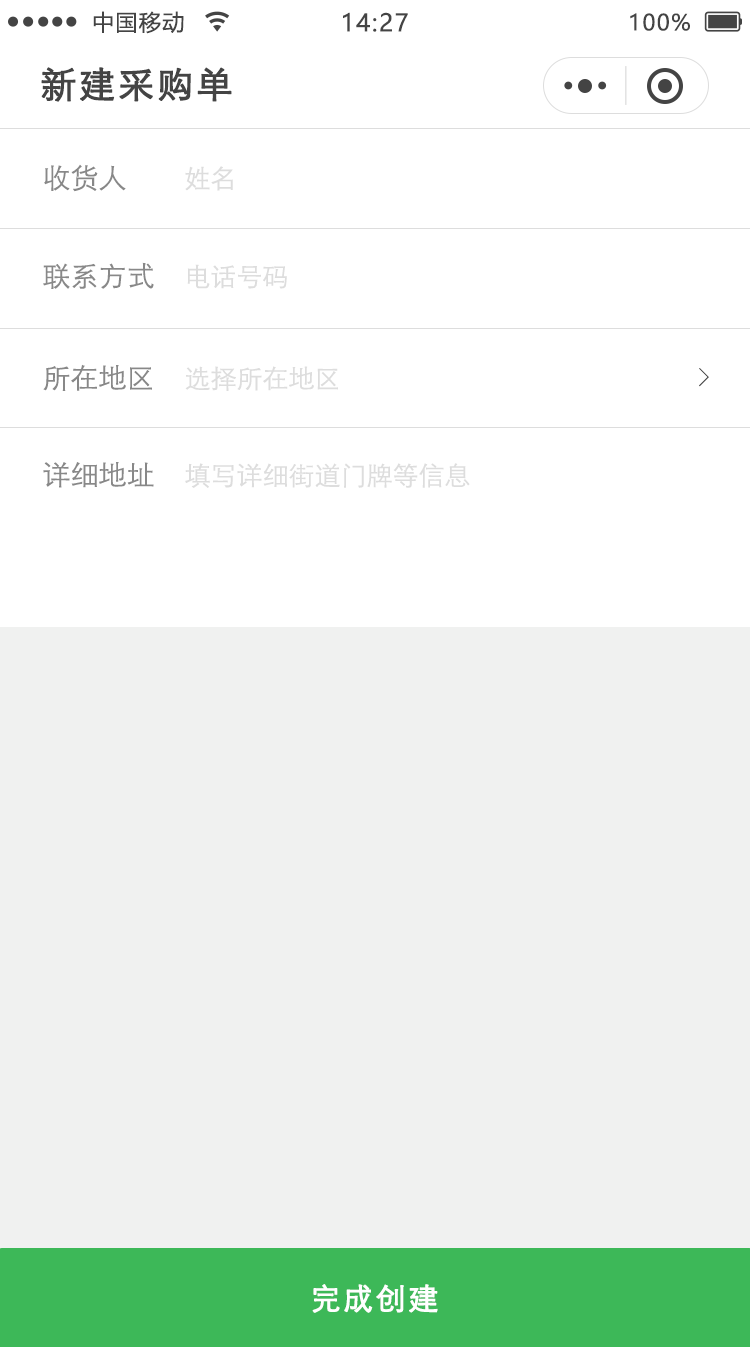
<style>
.page{position:relative;width:750px;height:1347px;background:#f0f1f0}
.page>*{position:absolute;margin:0}
.t1{font:22px "MicrosoftYaHei";letter-spacing:0.06em;color:#444444}
.t2{font:24px "MicrosoftYaHei";letter-spacing:0.06em;color:#444444}
.t3{font:36px "STXihei";letter-spacing:0.06em;color:#444444;font-weight:bold}
.t4{font:28px "STXihei";color:#888888}
.t5{font:26px "STXihei";color:#dddddd}
.t6{font:26px "SimSun";color:#444444}
.t7{font:30px "STXihei";letter-spacing:0.06em;color:#ffffff;font-weight:bold}
</style>
<div class="page">
<p class="t1" style="left:93px;top:11px;width:91px;height:23px">中国移动</p>
<p class="t2" style="left:343px;top:12px;width:65px;height:20px">14:27</p>
<p class="t1" style="left:630px;top:13px;width:60px;height:18px">100%</p>
<p class="t3" style="left:41px;top:67px;width:191px;height:35px">新建采购单</p>
<p class="t4" style="left:44px;top:164px;width:82px;height:28px">收货人</p>
<p class="t5" style="left:185px;top:166px;width:48px;height:25px">姓名</p>
<p class="t4" style="left:43px;top:262px;width:111px;height:27px">联系方式</p>
<p class="t5" style="left:187px;top:264px;width:100px;height:25px">电话号码</p>
<p class="t4" style="left:43px;top:364px;width:109px;height:27px">所在地区</p>
<p class="t5" style="left:185px;top:366px;width:153px;height:25px">选择所在地区</p>
<p class="t6" style="left:699px;top:368px;width:10px;height:19px">&gt;</p>
<p class="t4" style="left:43px;top:462px;width:111px;height:26px">详细地址</p>
<p class="t5" style="left:185px;top:463px;width:285px;height:25px">填写详细街道门牌等信息</p>
<p class="t7" style="left:312px;top:1284px;width:126px;height:29px">完成创建</p>
</div>
